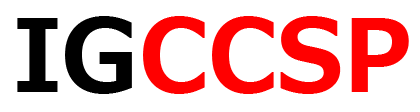
<style>
.page{position:relative;width:420px;height:112px;background:#ffffff}
.page>*{position:absolute;margin:0}
.t1{font:100px "Meiryo-Bold";color:#ff0000}
.t2{font:100px "Meiryo-Bold";color:#000000}
</style>
<div class="page">
<p class="t1" style="left:17px;top:16px;width:392px;height:78px"><span class="t2">IG</span>CCSP</p>
</div>
